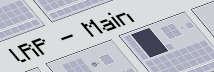
<style>
.page{position:relative;width:214px;height:72px;background:#dadedf}
.page>*{position:absolute;margin:0}
.t1{font:25.5px "Mojangles";color:#000000;scale:0.94 1}
</style>
<div class="page">
<p class="t1" style="left:8px;top:12px;width:127px;height:51px;rotate:-20deg">lRP - Main</p>
</div>
